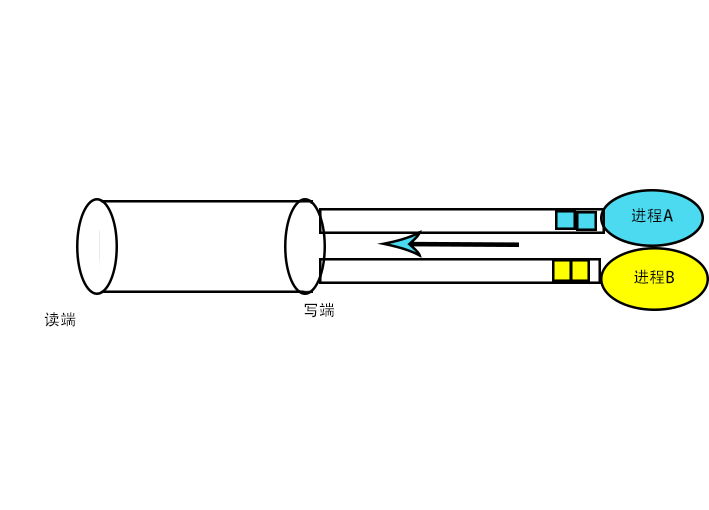
<style>
.page{position:relative;width:709px;height:510px;background:#ffffff}
.page>*{position:absolute;margin:0}
.t1{font:16px "AdobeHeitiStd-Regular";color:#0a0909}
</style>
<div class="page">
<p class="t1" style="left:631px;top:208px;width:42px;height:15px">进程A</p>
<p class="t1" style="left:634px;top:269px;width:40px;height:16px">进程B</p>
<p class="t1" style="left:304px;top:302px;width:30px;height:16px">写端</p>
<p class="t1" style="left:44px;top:312px;width:32px;height:15px">读端</p>
</div>
